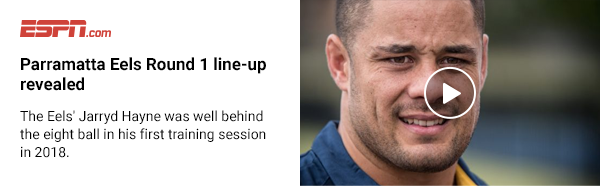
<style>
.page{position:relative;width:600px;height:186px;background:#ffffff}
.page>*{position:absolute;margin:0}
.t1{font:17px/20px "Roboto-Bold";color:#000000}
.t2{font:14px/18px "Roboto-Regular";color:#000000}
</style>
<div class="page">
<p class="t1" style="left:21px;top:57px;width:245px;height:34px">Parramatta Eels Round 1 line-up revealed</p>
<p class="t2" style="left:20px;top:110px;width:246px;height:48px">The Eels' Jarryd Hayne was well behind the eight ball in his first training session in 2018.</p>
</div>
